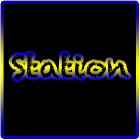
<style>
.page{position:relative;width:140px;height:140px;background:#000000}
.page>*{position:absolute;margin:0}
.t1{font:30px "Chalkduster";color:#000000}
</style>
<div class="page">
<p class="t1" style="left:11px;top:53px;width:118px;height:27px">Station</p>
</div>
